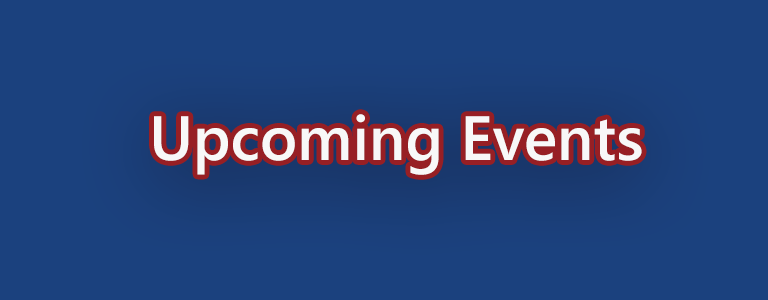
<style>
.page{position:relative;width:768px;height:300px;background:#1b417e}
.page>*{position:absolute;margin:0}
.t1{font:62.5px "SegoeUI-Semibold";color:#f8f8f8}
</style>
<div class="page">
<p class="t1" style="left:154px;top:114px;width:488px;height:61px">Upcoming Events</p>
</div>
